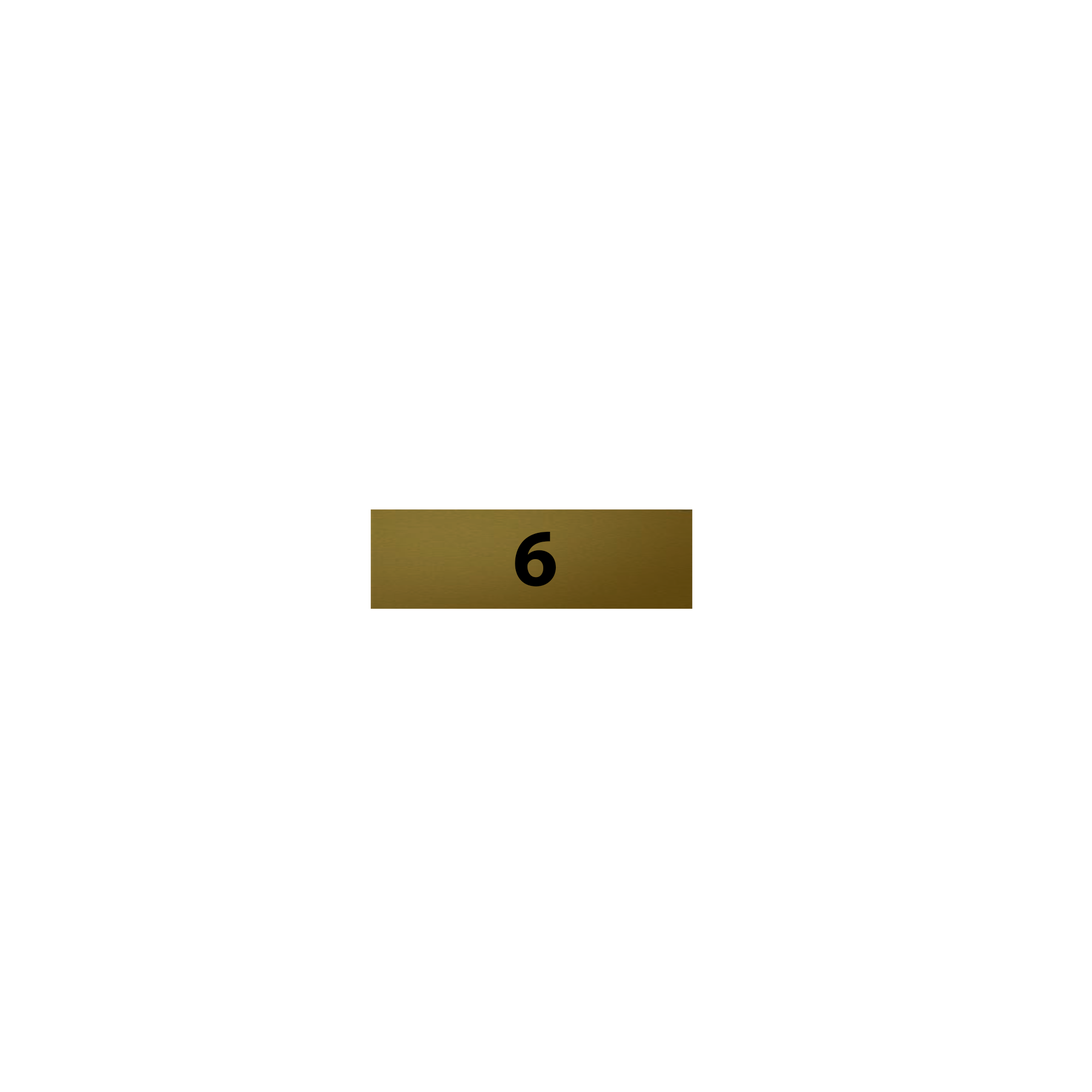
<style>
.page{position:relative;width:1092px;height:1092px;background:#ffffff}
.page>*{position:absolute;margin:0}
.t1{font:81.9px "MyriadPro-Bold";color:#000000}
</style>
<div class="page">
<p class="t1" style="left:515px;top:531px;width:41px;height:55px">6</p>
</div>
